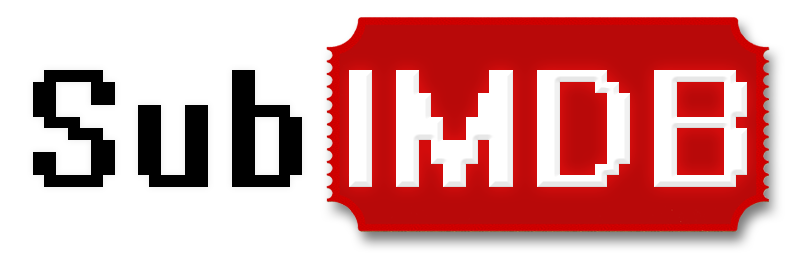
<style>
.page{position:relative;width:800px;height:256px;background:#ffffff}
.page>*{position:absolute;margin:0}
.t1{font:150px "System";color:#000000}
.t2{font:150px "System";color:#ffffff}
</style>
<div class="page">
<p class="t1" style="left:33px;top:70px;width:269px;height:117px">Sub</p>
<p class="t2" style="left:349px;top:70px;width:398px;height:117px">IMDB</p>
</div>
